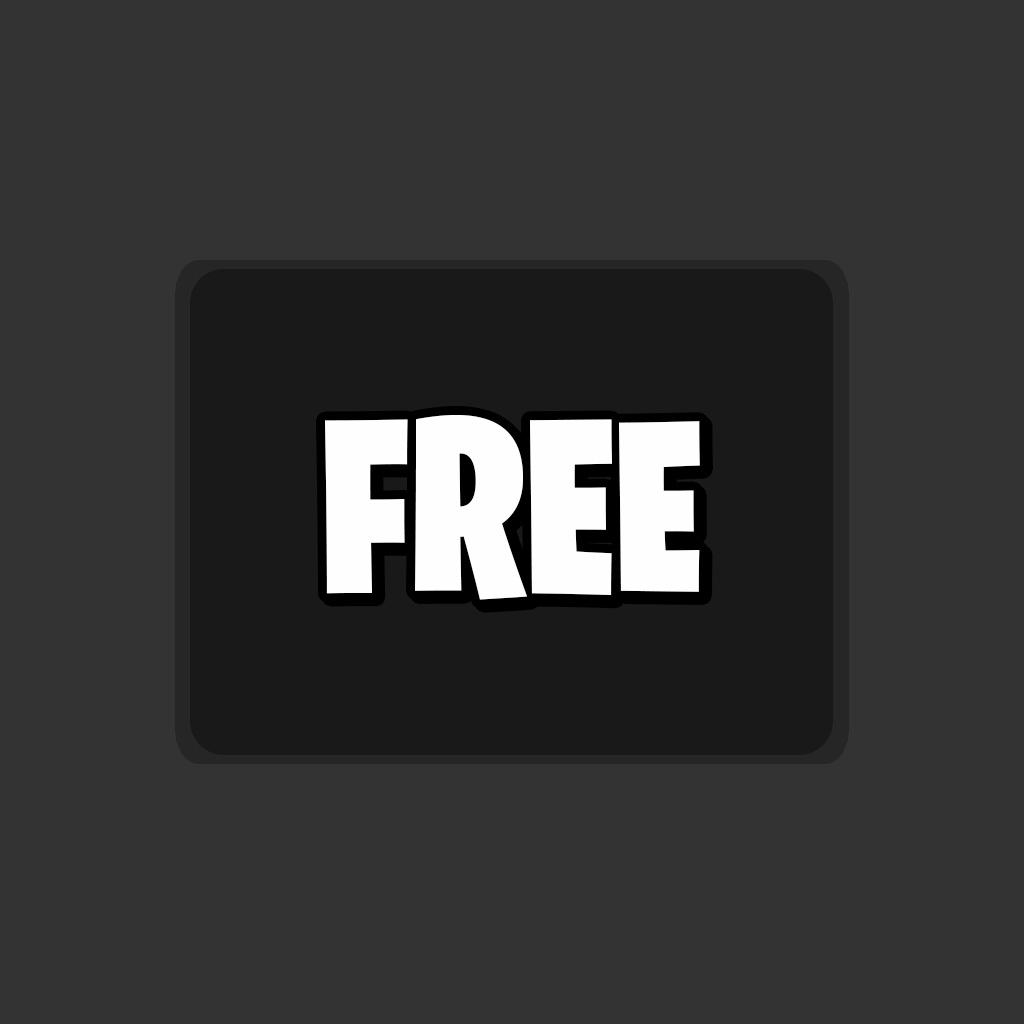
<style>
.page{position:relative;width:1024px;height:1024px;background:#333333}
.page>*{position:absolute;margin:0}
.t1{font:250px "BurbankBigCondensed-Black";color:#fefefe}
</style>
<div class="page">
<p class="t1" style="left:325px;top:415px;width:375px;height:185px">FREE</p>
</div>
